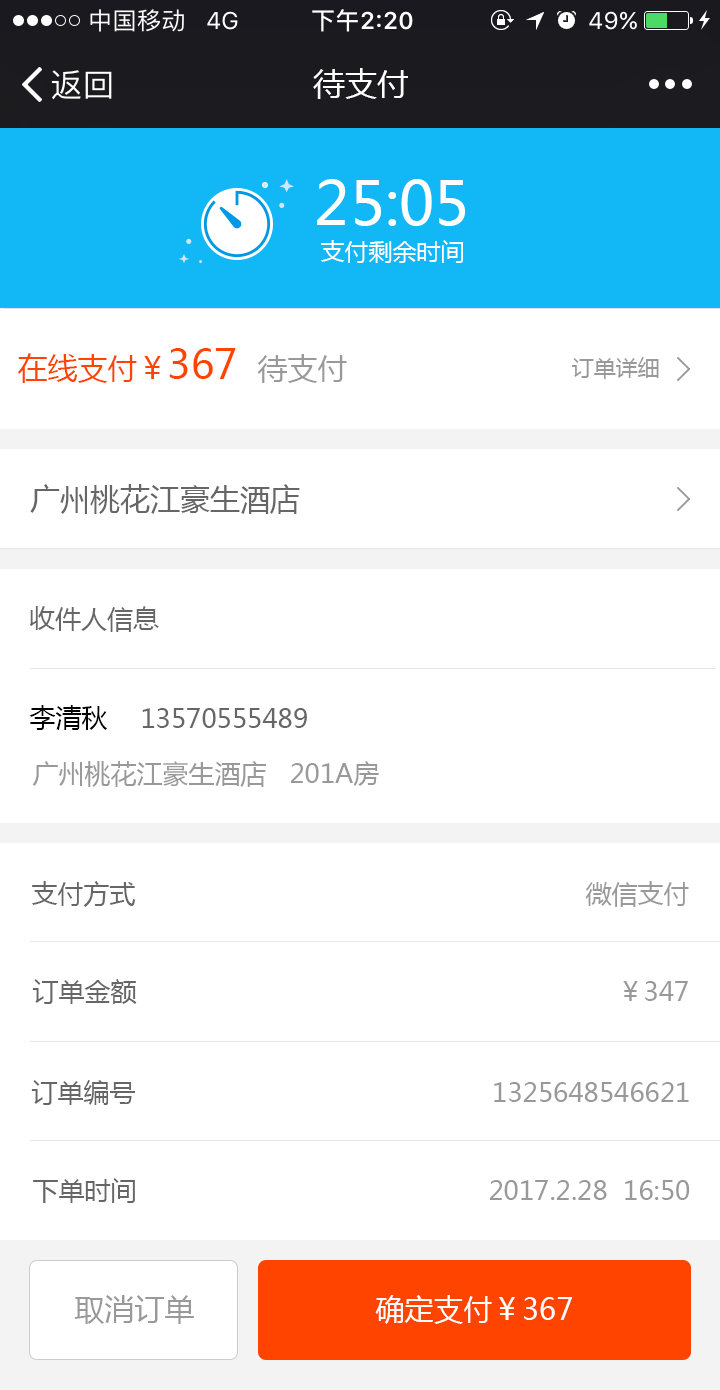
<style>
.page{position:relative;width:720px;height:1390px;background:#ffffff}
.page>*{position:absolute;margin:0}
.t1{font:32px "MicrosoftYaHei";color:#ffffff}
.t2{font:60px "MicrosoftYaHei";color:#ffffff}
.t3{font:24px "MicrosoftYaHei";color:#ffffff}
.t4{font:30px "MicrosoftYaHei";color:#ff4400}
.t5{font:40px "MicrosoftYaHei";color:#ff4400}
.t6{font:30px "MicrosoftYaHei";color:#999999}
.t7{font:22px "MicrosoftYaHei";color:#999999}
.t8{font:30px "MicrosoftYaHei";color:#666666}
.t9{font:26px "MicrosoftYaHei";color:#666666}
.t10{font:26px "MicrosoftYaHei";color:#000000}
.t11{font:26px "MicrosoftYaHei";color:#999999}
.t12{font:30px "MicrosoftYaHei";color:#ffffff}
</style>
<div class="page">
<p class="t1" style="left:313px;top:68px;width:95px;height:31px">待支付</p>
<p class="t2" style="left:317px;top:179px;width:148px;height:47px">25:05</p>
<p class="t3" style="left:321px;top:240px;width:142px;height:23px">支付剩余时间</p>
<p class="t4" style="left:17px;top:348px;width:219px;height:35px">在线支付￥<span class="t5">367</span></p>
<p class="t6" style="left:257px;top:354px;width:90px;height:29px">待支付</p>
<p class="t7" style="left:572px;top:357px;width:87px;height:22px">订单详细</p>
<p class="t8" style="left:30px;top:484px;width:270px;height:30px">广州桃花江豪生酒店</p>
<p class="t9" style="left:30px;top:606px;width:129px;height:26px">收件人信息</p>
<p class="t10" style="left:29px;top:705px;width:79px;height:25px">李清秋</p>
<p class="t9" style="left:142px;top:708px;width:165px;height:20px">13570555489</p>
<p class="t11" style="left:32px;top:761px;width:347px;height:26px">广州桃花江豪生酒店   201A房</p>
<p class="t9" style="left:32px;top:881px;width:104px;height:26px">支付方式</p>
<p class="t11" style="left:585px;top:881px;width:104px;height:26px">微信支付</p>
<p class="t9" style="left:32px;top:979px;width:105px;height:25px">订单金额</p>
<p class="t11" style="left:623px;top:981px;width:65px;height:20px">￥347</p>
<p class="t9" style="left:31px;top:1080px;width:104px;height:25px">订单编号</p>
<p class="t11" style="left:494px;top:1082px;width:195px;height:20px">1325648546621</p>
<p class="t9" style="left:33px;top:1178px;width:102px;height:25px">下单时间</p>
<p class="t11" style="left:489px;top:1180px;width:201px;height:20px">2017.2.28  16:50</p>
<p class="t6" style="left:74px;top:1295px;width:120px;height:29px">取消订单</p>
<p class="t12" style="left:375px;top:1295px;width:198px;height:29px">确定支付￥367</p>
</div>
